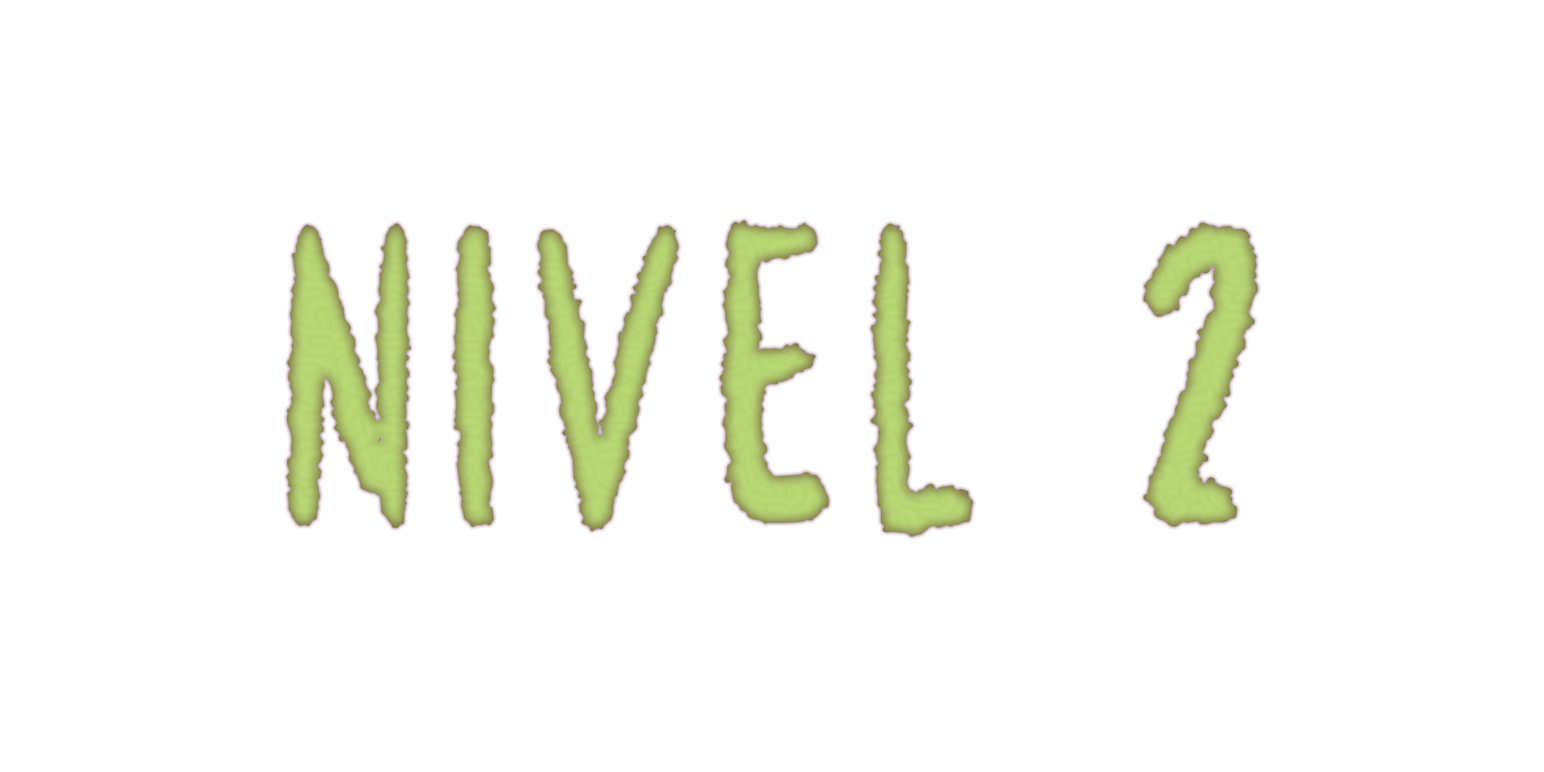
<style>
.page{position:relative;width:1544px;height:772px;background:#ffffff}
.page>*{position:absolute;margin:0}
.t1{font:321.7px "Metalien";letter-spacing:0.1em;color:#b7d974}
</style>
<div class="page">
<p class="t1" style="left:286px;top:220px;width:973px;height:317px">Nivel 2</p>
</div>
